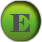
<style>
.page{position:relative;width:42px;height:42px}
.page>*{position:absolute;margin:0}
.t1{font:25px "Elephant-Regular";color:#505050}
</style>
<div class="page">
<p class="t1" style="left:10px;top:14px;width:20px;height:18px">E</p>
</div>
